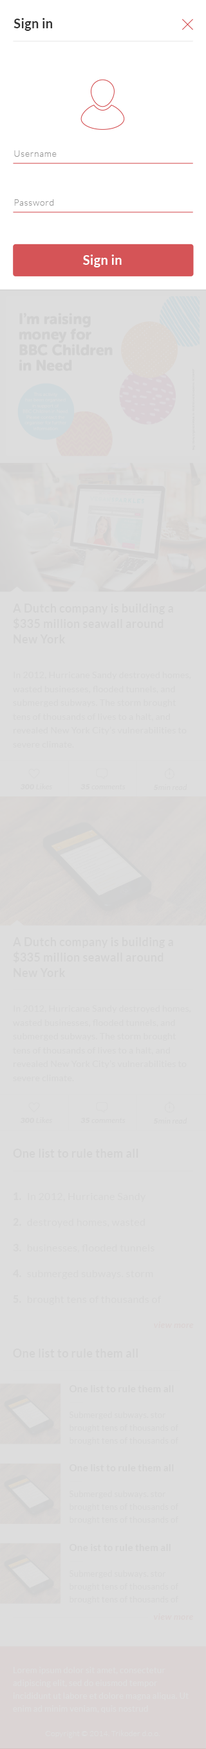
<style>
.page{position:relative;width:206px;height:1749px;background:#dddddd}
.page>*{position:absolute;margin:0}
.t1{font:12.9px "Lato-Bold";letter-spacing:0.02em;color:#333333}
.t2{font:9px "Lato-Light";letter-spacing:0.05em;color:#999999}
.t3{font:12.9px "Lato-Bold";letter-spacing:0.02em;color:#ffffff}
.t4{font:11.6px/15.4px "Lato-Bold";letter-spacing:0.02em;color:#d2d2d2}
.t5{font:9px/13.8px "Lato-Regular";letter-spacing:0.02em;color:#d5d5d5}
.t6{font:7.7px "Lato-Italic";letter-spacing:0.02em;color:#d4d4d4}
.t7{font:7.7px "Lato-BlackItalic";letter-spacing:0.02em;color:#d4d4d4}
.t8{font:11.6px "Lato-Bold";letter-spacing:0.02em;color:#d2d2d2}
.t9{font:10.3px/25.7px "Lato-Black";letter-spacing:0.02em;color:#d5d5d5}
.t10{font:9px "Lato-BoldItalic";letter-spacing:0.02em;color:#dad3d3}
.t11{font:8.4px/12.9px "Lato-Regular";letter-spacing:0.02em;color:#d5d5d5}
.t12{font:9.6px/17.4px "Lato-Bold";letter-spacing:0.02em;color:#d5d5d5}
.t13{font:8.4px/12.9px "Lato-Regular";letter-spacing:0.02em;color:#dddddd}
.t14{font:7.7px "Lato-Light";letter-spacing:0.02em;color:#dddddd}
</style>
<div class="page">
<p class="t1" style="left:14px;top:18px;width:38px;height:13px">Sign in</p>
<p class="t2" style="left:14px;top:150px;width:43px;height:7px">Username</p>
<p class="t2" style="left:14px;top:199px;width:40px;height:7px">Password</p>
<p class="t3" style="left:83px;top:255px;width:39px;height:12px">Sign in</p>
<p class="t4" style="left:13px;top:604px;width:160px;height:40px">A Dutch company is building a $335 million seawall around <br>New York</p>
<p class="t5" style="left:13px;top:672px;width:178px;height:76px">In 2012, Hurricane Sandy destroyed homes, wasted businesses, flooded tunnels, and <br>submerged subways. The storm brought tens of thousands of lives to a halt, and revealed New York City’s vulnerabilities to severe climate.<br>conditions and rising waters.</p>
<p class="t6" style="left:21px;top:784px;width:31px;height:5px"><span class="t7">300</span> Likes</p>
<p class="t6" style="left:80px;top:784px;width:45px;height:5px"><span class="t7">35</span> comments</p>
<p class="t6" style="left:153px;top:784px;width:34px;height:6px"><span class="t7">5</span>min read</p>
<p class="t4" style="left:13px;top:937px;width:160px;height:40px">A Dutch company is building a $335 million seawall around <br>New York</p>
<p class="t5" style="left:13px;top:1005px;width:178px;height:76px">In 2012, Hurricane Sandy destroyed homes, wasted businesses, flooded tunnels, and <br>submerged subways. The storm brought tens of thousands of lives to a halt, and revealed New York City’s vulnerabilities to severe climate.<br>conditions and rising waters.</p>
<p class="t6" style="left:21px;top:1117px;width:31px;height:6px"><span class="t7">300</span> Likes</p>
<p class="t6" style="left:80px;top:1118px;width:45px;height:5px"><span class="t7">35</span> comments</p>
<p class="t6" style="left:153px;top:1118px;width:34px;height:6px"><span class="t7">5</span>min read</p>
<p class="t8" style="left:13px;top:1149px;width:125px;height:9px">One list to rule them all</p>
<p class="t9" style="left:13px;top:1192px;width:8px;height:111px">1.<br>2.<br>3.<br>4.<br>5.</p>
<p class="t10" style="left:154px;top:1322px;width:40px;height:6px">view more</p>
<p class="t8" style="left:13px;top:1349px;width:125px;height:9px">One list to rule them all</p>
<p class="t11" style="left:69px;top:1385px;width:109px;height:60px"><span class="t12">One list to rule them all<br></span><br>Submerged subways. stor <br>brought tens of thousands of<br>brought tens of thousands of</p>
<p class="t11" style="left:69px;top:1464px;width:109px;height:60px"><span class="t12">One list to rule them all<br></span><br>Submerged subways. stor <br>brought tens of thousands of<br>brought tens of thousands of</p>
<p class="t11" style="left:69px;top:1544px;width:109px;height:60px"><span class="t12">One ist to rule them all<br></span><br>Submerged subways. stor <br>brought tens of thousands of<br>brought tens of thousands of</p>
<p class="t10" style="left:153px;top:1614px;width:40px;height:6px">view more</p>
<p class="t13" style="left:13px;top:1667px;width:175px;height:46px">Lorem ipsum dolor sit amet, consectetur adipiscing elit, sed do eiusmod tempor <br>incididunt ut labore et dolore magna aliqua. Ut enim ad minim veniam, quis nostrud</p>
<p class="t14" style="left:45px;top:1730px;width:115px;height:8px">Copyright © 2014. Trikoder d.o.o.</p>
</div>
